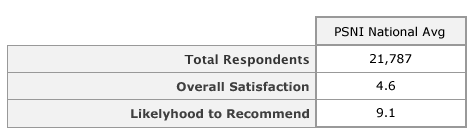
<style>
.page{position:relative;width:473px;height:135px;background:#ffffff}
.page>*{position:absolute;margin:0}
.t1{font:12px "Verdana";color:#000000}
.t2{font:12px "Verdana-Bold";color:#3f3f3f}
</style>
<div class="page">
<p class="t1" style="left:335px;top:26px;width:110px;height:13px">PSNI National Avg</p>
<p class="t1" style="left:370px;top:54px;width:42px;height:11px">21,787</p>
<p class="t2" style="left:176px;top:81px;width:133px;height:11px">Overall Satisfaction</p>
<p class="t1" style="left:376px;top:81px;width:19px;height:10px">4.6</p>
<p class="t2" style="left:131px;top:109px;width:178px;height:12px">Likelyhood to Recommend</p>
<p class="t1" style="left:376px;top:108px;width:19px;height:10px">9.1</p>
</div>
